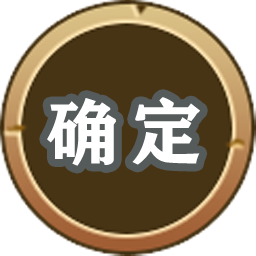
<style>
.page{position:relative;width:256px;height:256px;background:#473415}
.page>*{position:absolute;margin:0}
.t1{font:72px "FZCHSJW--GB1-0";letter-spacing:0.16em;color:#ffffff}
</style>
<div class="page">
<p class="t1" style="left:47px;top:97px;width:153px;height:69px">确定</p>
</div>
